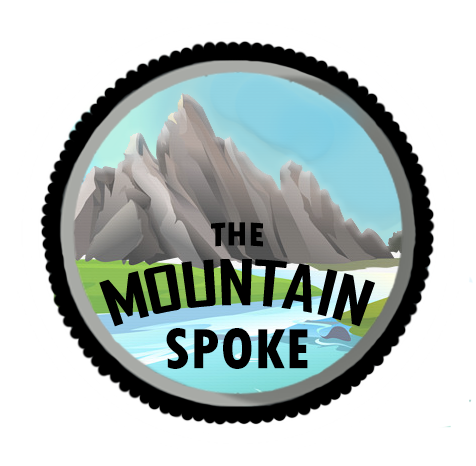
<style>
.page{position:relative;width:476px;height:466px;background:#ffffff}
.page>*{position:absolute;margin:0}
.t1{font:36px "TwCenMT-CondensedExtraBold";color:#000000}
.t2{font:60px "TwCenMT-CondensedExtraBold";color:#000000}
</style>
<div class="page">
<p class="t1" style="left:211px;top:222px;width:52px;height:25px">THE</p>
<p class="t2" style="left:166px;top:328px;width:142px;height:41px;text-align:center">SPOKE<br>SPOKE</p>
</div>
